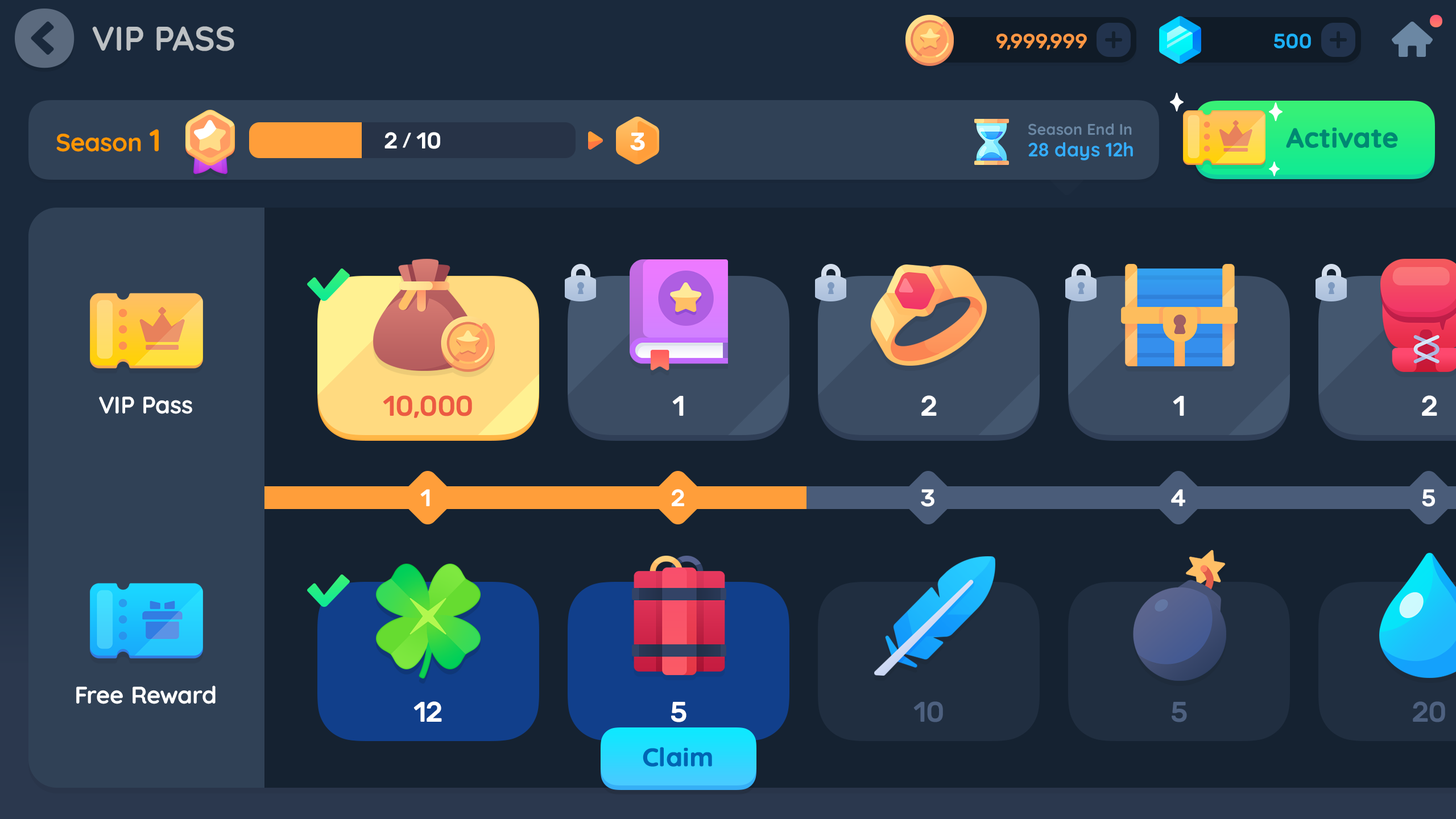
<style>
.page{position:relative;width:1456px;height:819px;background:#152231}
.page>*{position:absolute;margin:0}
.t1{font:34.1px "Quicksand-Bold";color:#bdc1c4}
.t2{font:20.5px "Rubik-Medium";letter-spacing:-0.01em;color:#fd9744;text-transform:uppercase}
.t3{font:20.5px "Rubik-Medium";letter-spacing:-0.01em;color:#1cb0f6;text-transform:uppercase}
.t4{font:15.4px "Quicksand-Bold";color:#6b87a3}
.t5{font:25px "Quicksand-Bold";color:#ff9600}
.t6{font:31.3px "Quicksand-Bold";color:#ff9600}
.t7{font:22.7px "Rubik-Medium";letter-spacing:-0.01em;color:#ffffff;text-transform:uppercase}
.t8{font:17.1px "Rubik-Medium";letter-spacing:-0.01em;color:#ffffff;text-transform:uppercase}
.t9{font:25px "Rubik-SemiBold";letter-spacing:-0.01em;color:#ffffff}
.t10{font:27.3px "Quicksand-Bold";color:#008873;font-weight:bold}
.t11{font:19.3px "Quicksand-Bold";color:#34adfc}
.t12{font:23.9px "Quicksand-Bold";color:#ffffff}
.t13{font:28.4px "Rubik-Medium";letter-spacing:-0.01em;color:#ec5a42}
.t14{font:28.4px "Rubik-Medium";letter-spacing:-0.01em;color:#ffffff}
.t15{font:23.9px "Rubik-Medium";letter-spacing:-0.01em;color:#ffffff}
.t16{font:28.4px "Rubik-Medium";letter-spacing:-0.01em;color:#4e6180}
.t17{font:25.6px "Quicksand-Bold";color:#0065b4;font-weight:bold}
</style>
<div class="page">
<p class="t1" style="left:92px;top:26px;width:142px;height:25px">VIP PASS</p>
<p class="t2" style="left:996px;top:34px;width:91px;height:16px">9,999,999</p>
<p class="t3" style="left:1274px;top:34px;width:37px;height:14px">500</p>
<p class="t4" style="left:1028px;top:123px;width:104px;height:12px">Season End In</p>
<p class="t5" style="left:56px;top:129px;width:103px;height:23px">Season <span class="t6">1</span></p>
<p class="t7" style="left:384px;top:132px;width:56px;height:17px">2 <span class="t8">/</span> 10</p>
<p class="t9" style="left:630px;top:133px;width:15px;height:18px">3</p>
<p class="t10" style="left:1286px;top:127px;width:112px;height:21px">Activate</p>
<p class="t11" style="left:1028px;top:142px;width:105px;height:18px">28 days 12h</p>
<p class="t12" style="left:99px;top:396px;width:93px;height:18px">VIP Pass</p>
<p class="t13" style="left:383px;top:395px;width:89px;height:23px">10,000</p>
<p class="t14" style="left:672px;top:396px;width:12px;height:20px">1</p>
<p class="t14" style="left:921px;top:395px;width:16px;height:21px">2</p>
<p class="t14" style="left:1173px;top:396px;width:11px;height:20px">1</p>
<p class="t14" style="left:1422px;top:395px;width:15px;height:21px">2</p>
<p class="t15" style="left:420px;top:489px;width:10px;height:17px">1</p>
<p class="t15" style="left:672px;top:489px;width:12px;height:17px">2</p>
<p class="t15" style="left:921px;top:489px;width:13px;height:18px">3</p>
<p class="t15" style="left:1171px;top:489px;width:14px;height:17px">4</p>
<p class="t15" style="left:1422px;top:489px;width:13px;height:18px">5</p>
<p class="t12" style="left:76px;top:685px;width:140px;height:19px">Free Reward</p>
<p class="t14" style="left:413px;top:701px;width:29px;height:21px">12</p>
<p class="t14" style="left:671px;top:702px;width:15px;height:20px">5</p>
<p class="t16" style="left:913px;top:701px;width:30px;height:21px">10</p>
<p class="t16" style="left:1172px;top:702px;width:15px;height:20px">5</p>
<p class="t16" style="left:1413px;top:701px;width:32px;height:21px">20</p>
<p class="t17" style="left:643px;top:747px;width:69px;height:20px">Claim</p>
</div>
